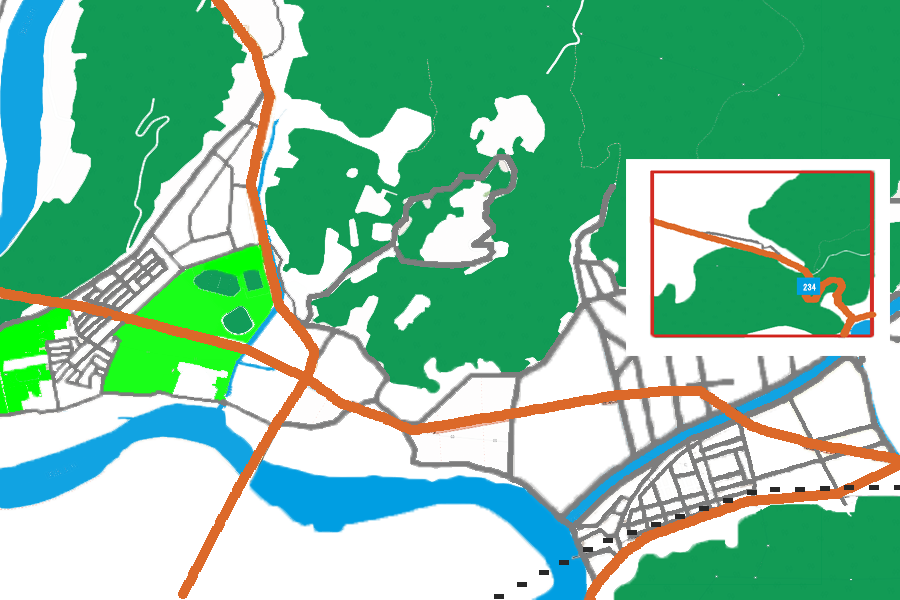
<style>
.page{position:relative;width:900px;height:600px;background:#129b55}
.page>*{position:absolute;margin:0}
.t1{font:8px "HGSGothicE";color:#ffffff}
</style>
<div class="page">
<p class="t1" style="left:803px;top:283px;width:13px;height:8px">234</p>
</div>
